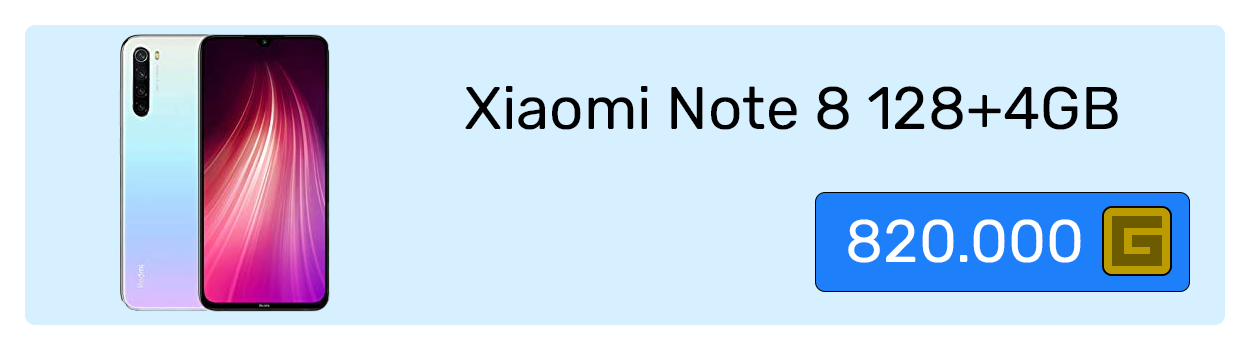
<style>
.page{position:relative;width:1250px;height:350px;background:#d7f0ff}
.page>*{position:absolute;margin:0}
.t1{font:60px "Rubik-Regular";color:#000000}
.t2{font:60px "Rubik-Regular";color:#ffffff}
</style>
<div class="page">
<p class="t1" style="left:465px;top:86px;width:653px;height:44px">Xiaomi Note 8 128+4GB</p>
<p class="t2" style="left:848px;top:219px;width:233px;height:44px">820.000</p>
</div>
